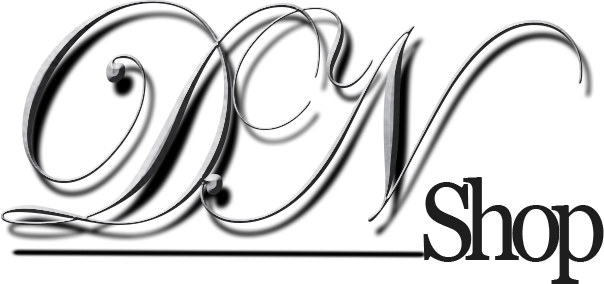
<style>
.page{position:relative;width:604px;height:284px;background:#ffffff}
.page>*{position:absolute;margin:0}
.t1{font:331px "EdwardianScriptITC";letter-spacing:-0.125em;scale:0.81 1}
.t2{font:303.4px "EdwardianScriptITC";letter-spacing:-0.125em;scale:0.88 1}
.t3{font:110px "Georgia";letter-spacing:-0.125em;color:#1e1e1e;scale:0.91 1}
</style>
<div class="page">
<p class="t1" style="left:0px;top:0px;width:583px;height:225px">D<span class="t2">N</span></p>
<p class="t3" style="left:423px;top:177px;width:181px;height:107px">Shop</p>
</div>
